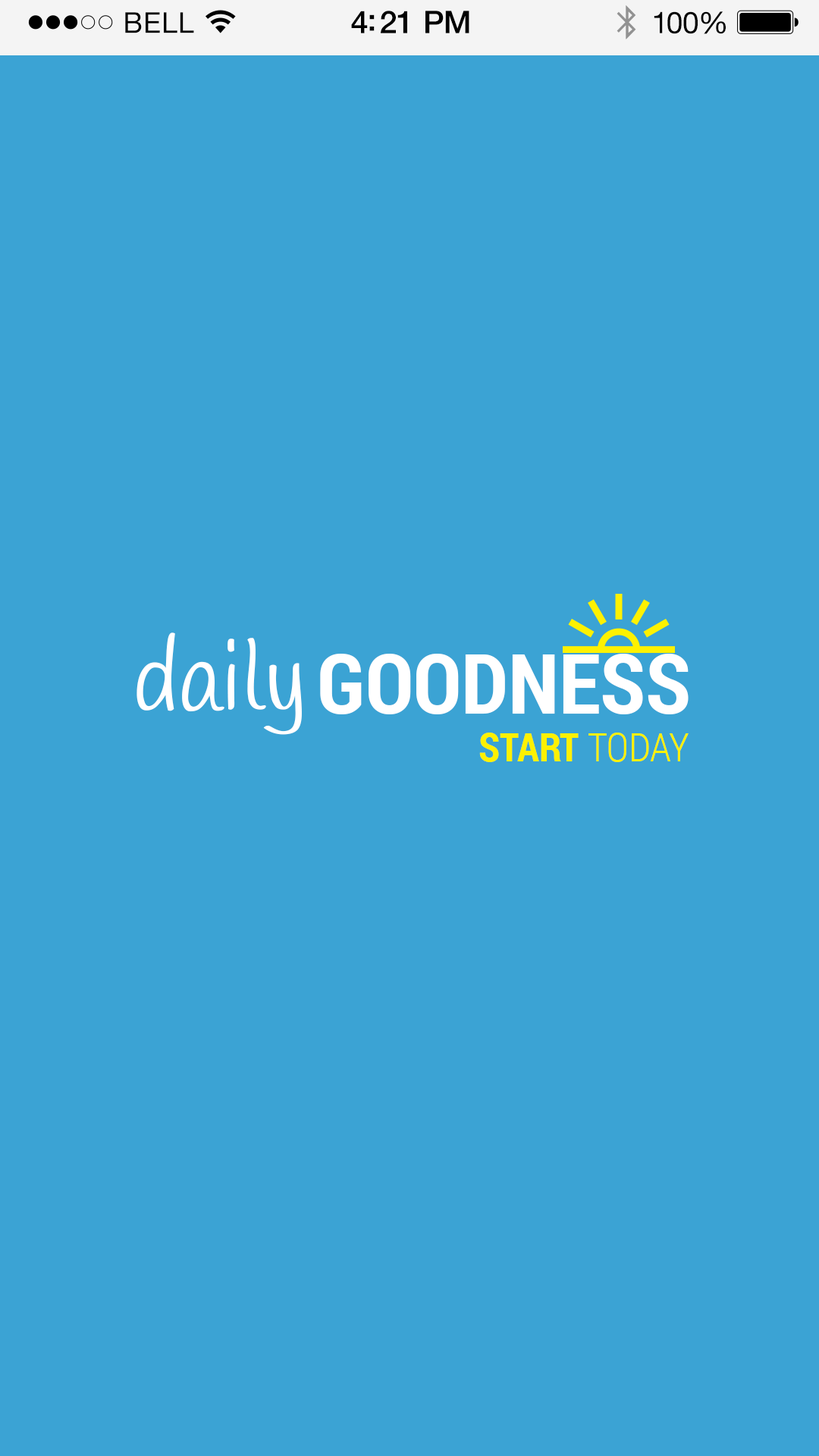
<style>
.page{position:relative;width:819px;height:1456px;background:#3ba3d4}
.page>*{position:absolute;margin:0}
.t1{font:28.7px "HelveticaNeue";letter-spacing:0.02em;color:#000000}
.t2{font:31.2px "HelveticaNeue-Medium";letter-spacing:-0.02em;color:#000000}
.t3{font:30px "HelveticaNeue";letter-spacing:-0.02em;color:#010101}
.t4{font:96.6px "Handlee-Regular";color:#ffffff}
.t5{font:83.8px "RobotoCondensed-Bold";color:#ffffff}
.t6{font:39.3px "RobotoCondensed-Bold";color:#fef100}
.t7{font:39.3px "RobotoCondensed-Light";color:#fef100}
</style>
<div class="page">
<p class="t1" style="left:125px;top:12px;width:69px;height:21px">BELL</p>
<p class="t2" style="left:351px;top:11px;width:118px;height:22px">4:21 PM</p>
<p class="t3" style="left:654px;top:11px;width:72px;height:23px">100%</p>
<p class="t4" style="left:136px;top:632px;width:166px;height:103px">daily</p>
<p class="t5" style="left:320px;top:654px;width:369px;height:60px">GOODNESS</p>
<p class="t6" style="left:479px;top:733px;width:210px;height:29px">START <span class="t7">TODAY</span></p>
</div>
